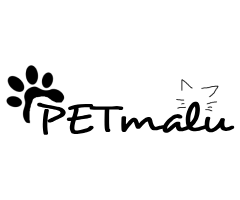
<style>
.page{position:relative;width:240px;height:200px;background:#ffffff}
.page>*{position:absolute;margin:0}
.t1{font:44.4px "Desyrel";color:#000000;font-weight:bold}
</style>
<div class="page">
<p class="t1" style="left:37px;top:101px;width:198px;height:34px">PETmalu</p>
</div>
